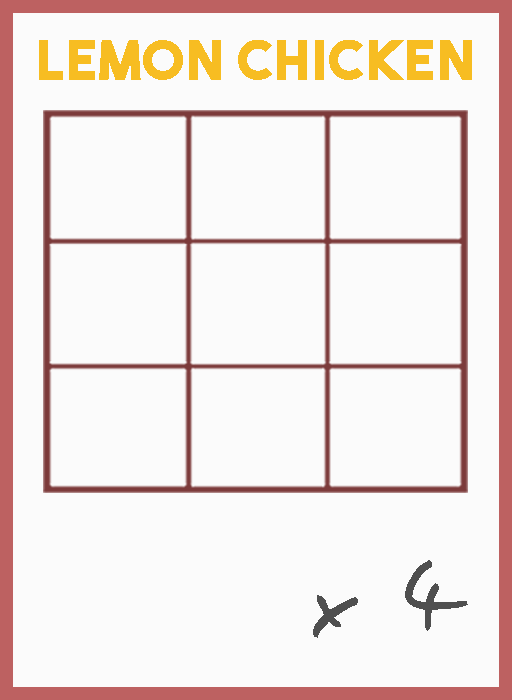
<style>
.page{position:relative;width:512px;height:700px;background:#fbfbfb}
.page>*{position:absolute;margin:0}
.t1{font:54.5px "TheBoldFont";letter-spacing:0.05em;color:#f7bd22}
.t2{font:106.1px "EasySpeech";letter-spacing:0.05em;color:#4f4f4f}
</style>
<div class="page">
<p class="t1" style="left:39px;top:40px;width:433px;height:40px">lemon chicken</p>
<p class="t2" style="left:313px;top:560px;width:155px;height:78px">x 4</p>
</div>
